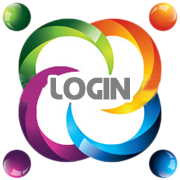
<style>
.page{position:relative;width:180px;height:180px;background:#ffffff}
.page>*{position:absolute;margin:0}
.t1{font:31.1px "Queen-of-Camelot";color:#808080;font-weight:bold}
</style>
<div class="page">
<p class="t1" style="left:50px;top:77px;width:80px;height:23px">Login</p>
</div>
